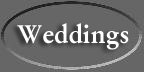
<style>
.page{position:relative;width:144px;height:72px;background:#666666}
.page>*{position:absolute;margin:0}
.t1{font:26px "Garamond-Halbfett";color:#ffffff}
</style>
<div class="page">
<p class="t1" style="left:17px;top:23px;width:112px;height:27px">Weddings</p>
</div>
